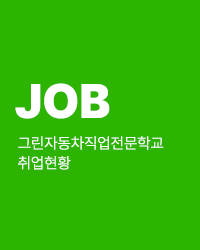
<style>
.page{position:relative;width:200px;height:250px;background:#2db400}
.page>*{position:absolute;margin:0}
.t1{font:48px "Pretendard-Black";color:#ffffff}
.t2{font:15.4px/19.8px "Pretendard-Light";color:#ffffff}
</style>
<div class="page">
<p class="t1" style="left:15px;top:83px;width:95px;height:36px">JOB</p>
<p class="t2" style="left:18px;top:136px;width:146px;height:34px">그린자동차직업전문학교<br>취업현황</p>
</div>
